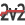
<style>
.page{position:relative;width:25px;height:25px;background:#ffffff}
.page>*{position:absolute;margin:0}
.t1{font:25px "MyriadPro-Regular";letter-spacing:-0.05em;color:#363636;font-weight:bold;scale:0.7 1}
</style>
<div class="page">
<p class="t1" style="left:0px;top:3px;width:25px;height:18px">2v2</p>
</div>
